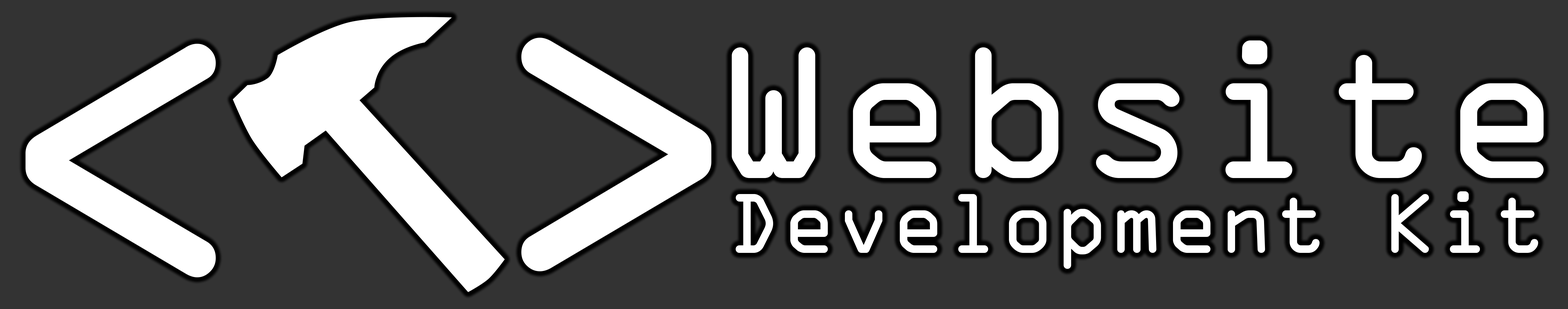
<style>
.page{position:relative;width:1568px;height:309px;background:#333333}
.page>*{position:absolute;margin:0}
.t1{font:458.4px "OCRAExtended";color:#ffffff}
.t2{font:201px "OCRAExtended";color:#ffffff}
.t3{font:90.5px "OCRAExtended";color:#ffffff}
</style>
<div class="page">
<p class="t1" style="left:521px;top:38px;width:191px;height:233px">&gt;</p>
<p class="t2" style="left:732px;top:40px;width:812px;height:138px">Website</p>
<p class="t1" style="left:25px;top:44px;width:191px;height:233px">&lt;</p>
<p class="t3" style="left:735px;top:191px;width:803px;height:78px">Development Kit</p>
</div>
